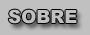
<style>
.page{position:relative;width:90px;height:35px;background:#c0c0c0}
.page>*{position:absolute;margin:0}
.t1{font:18px "Arial-Black";color:#c0c0c0}
</style>
<div class="page">
<p class="t1" style="left:8px;top:9px;width:69px;height:15px">SOBRE</p>
</div>
